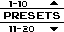
<style>
.page{position:relative;width:64px;height:32px;background:#ffffff}
.page>*{position:absolute;margin:0}
.t1{font:10px "04b03";color:#000000;scale:1.06 1}
.t2{font:9px "04b03";color:#000000;scale:1.06 1}
.t3{font:14px "ArcadeClassic";color:#000000;scale:1.05 1}
</style>
<div class="page">
<p class="t1" style="left:9px;top:1px;width:18px;height:6px">1-1<span class="t2">0</span></p>
<p class="t3" style="left:4px;top:12px;width:56px;height:7px">PRESETS</p>
<p class="t1" style="left:9px;top:26px;width:25px;height:6px">11-2<span class="t2">0</span></p>
</div>
